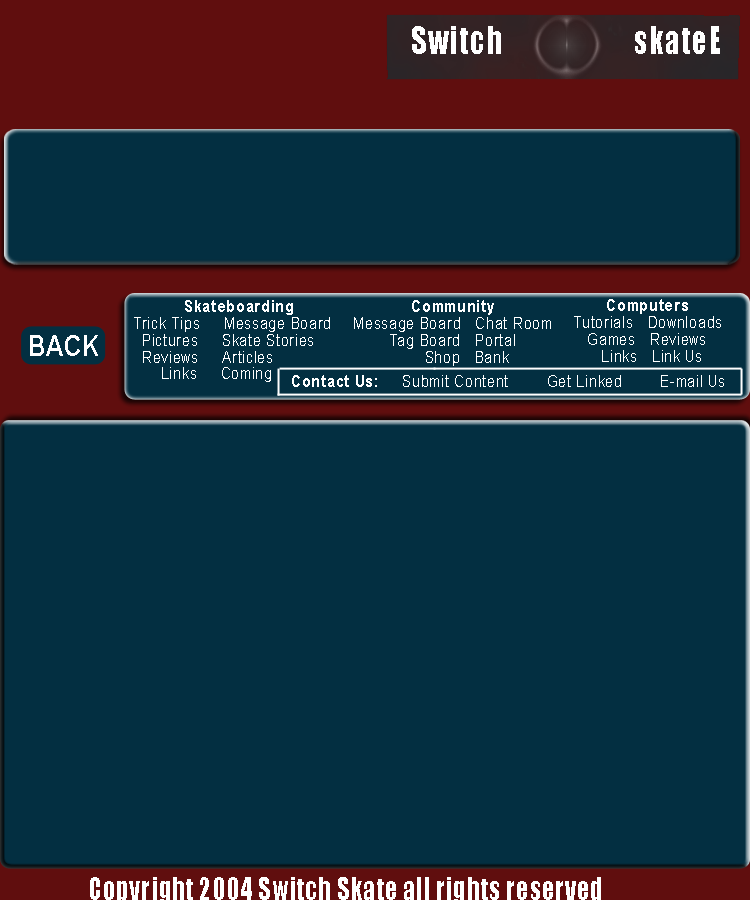
<style>
.page{position:relative;width:750px;height:900px;background:#032f41}
.page>*{position:absolute;margin:0}
.t1{font:36px "Impact";letter-spacing:0.05em;color:#ffffff;scale:0.83 1}
.t2{font:16.8px "ArialMT";letter-spacing:0.05em;color:#ffffff;scale:0.83 1}
.t3{font:16.8px "Arial-BoldMT";letter-spacing:0.05em;color:#ffffff;scale:0.83 1}
.t4{font:28.8px "Arial-BoldMT";letter-spacing:0.05em;color:#ffffff;scale:0.83 1}
</style>
<div class="page">
<p class="t1" style="left:412px;top:26px;width:308px;height:28px">Switch                    skateE</p>
<p class="t2" style="left:134px;top:300px;width:196px;height:82px;text-align:center"><span class="t3">Skateboarding<br></span>Trick Tips     Message Board<br>  Pictures     Skate Stories<br>  Reviews     Articles<br>      Links     Coming</p>
<p class="t2" style="left:354px;top:300px;width:197px;height:66px;text-align:center"><span class="t3">Community<br></span>Message Board   Chat Room<br>Tag Board   Portal<br>      Shop   Bank</p>
<p class="t2" style="left:574px;top:299px;width:147px;height:63px;text-align:center"><span class="t3">Computers<br></span>Tutorials   Downloads<br>      Games   Reviews<br>         Links   Link Us</p>
<p class="t4" style="left:30px;top:335px;width:68px;height:21px">BACK</p>
<p class="t2" style="left:292px;top:375px;width:432px;height:12px"><span class="t3">Contact Us:     </span>Submit Content        Get Linked        E-mail Us</p>
</div>
